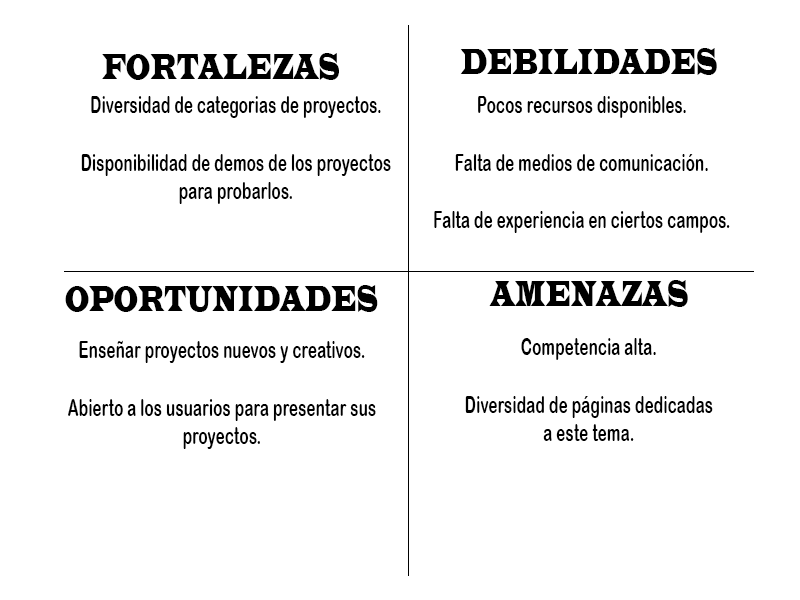
<style>
.page{position:relative;width:800px;height:600px;background:#ffffff}
.page>*{position:absolute;margin:0}
.t1{font:37px "LatinWide";color:#000000;scale:0.49 1}
.t2{font:24px "ArialRoundedMTBold";color:#000000;scale:0.64 1}
</style>
<div class="page">
<p class="t1" style="left:102px;top:53px;width:237px;height:27px">FORTALEZAS</p>
<p class="t1" style="left:460px;top:48px;width:257px;height:27px">DEBILIDADES</p>
<p class="t2" style="left:81px;top:96px;width:310px;height:108px;text-align:center">Diversidad de categorias de proyectos.<br><br>Disponibilidad de demos de los proyectos para probarlos.</p>
<p class="t2" style="left:434px;top:96px;width:296px;height:137px;text-align:center">Pocos recursos disponibles.<br><br>Falta de medios de comunicación.<br><br>Falta de experiencia en ciertos campos.</p>
<p class="t1" style="left:489px;top:280px;width:199px;height:27px">AMENAZAS</p>
<p class="t1" style="left:65px;top:285px;width:313px;height:27px">OPORTUNIDADES</p>
<p class="t2" style="left:68px;top:340px;width:308px;height:109px;text-align:center">Enseñar proyectos nuevos y creativos.<br><br>Abierto a los usuarios para presentar sus <br>proyectos.</p>
<p class="t2" style="left:465px;top:338px;width:248px;height:103px;text-align:center">Competencia alta.<br><br>Diversidad de páginas dedicadas<br>a este tema.</p>
</div>
